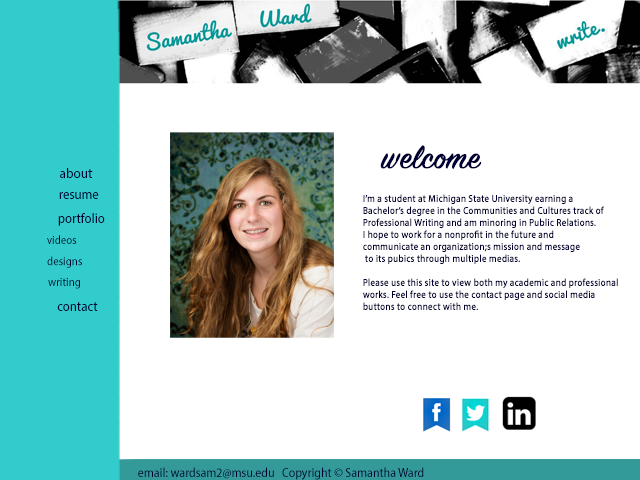
<style>
.page{position:relative;width:640px;height:480px;background:#ffffff}
.page>*{position:absolute;margin:0}
.t1{font:36px "SignPainter-HouseScript";color:#000033;font-weight:bold}
.t2{font:14px "MyriadPro-SemiCn";color:#000033;scale:1.03 1}
.t3{font:14px "MyriadPro-SemiCn";color:#000033}
.t4{font:10px/12px "MyriadPro-SemiCn";color:#000033;font-weight:bold}
.t5{font:12px "MyriadPro-SemiCn";color:#000033}
.t6{font:13px "MyriadPro-SemiCn";color:#000033}
</style>
<div class="page">
<p class="t1" style="left:380px;top:145px;width:102px;height:24px">welcome</p>
<p class="t2" style="left:60px;top:168px;width:33px;height:10px">about</p>
<p class="t3" style="left:59px;top:192px;width:40px;height:7px">resume</p>
<p class="t4" style="left:363px;top:194px;width:255px;height:116px">I’m a student at Michigan State University earning a <br>Bachelor’s degree in the Communities and Cultures track of<br>Professional Writing and am minoring in Public Relations. <br>I hope to work for a nonprofit in the future and <br>communicate an organization;s mission and message<br> to its pubics through multiple medias.<br><br>Please use this site to view both my academic and professional<br>works. Feel free to use the contact page and social media<br>buttons to connect with me.</p>
<p class="t3" style="left:58px;top:213px;width:47px;height:13px">portfolio</p>
<p class="t5" style="left:47px;top:235px;width:30px;height:9px">videos</p>
<p class="t5" style="left:47px;top:256px;width:35px;height:12px">designs</p>
<p class="t5" style="left:48px;top:278px;width:32px;height:11px">writing</p>
<p class="t3" style="left:57px;top:302px;width:41px;height:9px">contact</p>
<p class="t6" style="left:138px;top:467px;width:286px;height:13px">email: wardsam2@msu.edu   Copyright © Samantha Ward</p>
</div>
